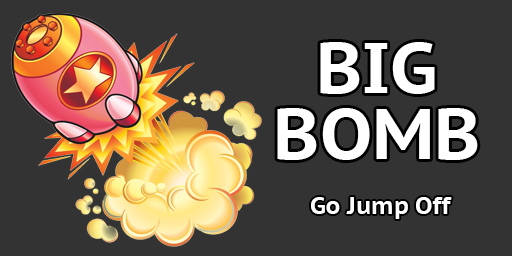
<style>
.page{position:relative;width:512px;height:256px;background:#333333}
.page>*{position:absolute;margin:0}
.t1{font:72px/66px "PTSans-CaptionBold";color:#ffffff}
.t2{font:24px "PTSans-CaptionBold";color:#ffffff}
</style>
<div class="page">
<p class="t1" style="left:277px;top:42px;width:201px;height:118px;text-align:center">BIG<br>BOMB</p>
<p class="t2" style="left:311px;top:197px;width:141px;height:22px">Go Jump Off</p>
</div>
